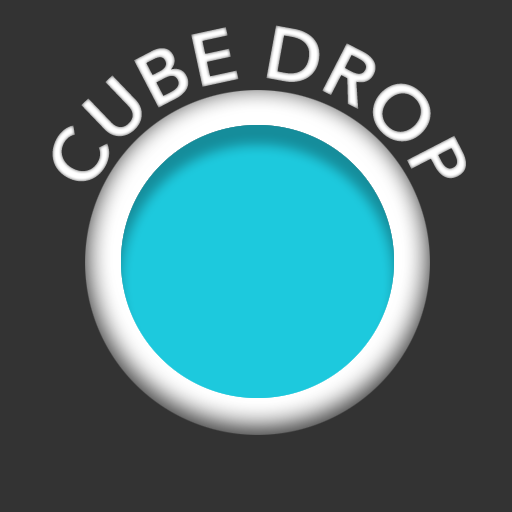
<style>
.page{position:relative;width:512px;height:512px;background:#333333}
.page>*{position:absolute;margin:0}
.t1{font:75px/112.5px "AvenirNextLTPro-Demi";color:#ffffff}
</style>
<div class="page">
<p class="t1" style="left:52px;top:25px;width:414px;height:157px;text-align:center">CUBE DROP</p>
</div>
